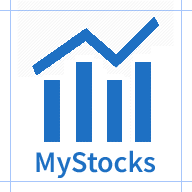
<style>
.page{position:relative;width:192px;height:192px;background:#ffffff}
.page>*{position:absolute;margin:0}
.t1{font:30px "SourceSansPro-Semibold";color:#1e70c3}
</style>
<div class="page">
<p class="t1" style="left:36px;top:150px;width:119px;height:28px">MyStocks</p>
</div>
